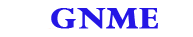
<style>
.page{position:relative;width:193px;height:37px;background:#ffffff}
.page>*{position:absolute;margin:0}
.t1{font:28px "PerpetuaTitlingMT-Bold";color:#2516e5;font-weight:bold;scale:1.16 1}
</style>
<div class="page">
<p class="t1" style="left:51px;top:8px;width:107px;height:21px">GNME</p>
</div>
